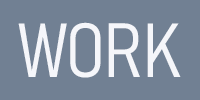
<style>
.page{position:relative;width:200px;height:100px;background:#718093}
.page>*{position:absolute;margin:0}
.t1{font:75.4px "Bahnschrift_300wght_83wdth";color:#f5f6fa}
</style>
<div class="page">
<p class="t1" style="left:18px;top:22px;width:163px;height:56px">WORK</p>
</div>
